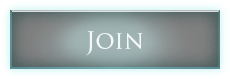
<style>
.page{position:relative;width:230px;height:79px}
.page>*{position:absolute;margin:0}
.t1{font:24px "TrajanPro3-Regular";color:#f1f1f1}
</style>
<div class="page">
<p class="t1" style="left:86px;top:31px;width:57px;height:25px">Join</p>
</div>
